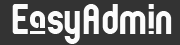
<style>
.page{position:relative;width:180px;height:45px;background:#333333}
.page>*{position:absolute;margin:0}
.t1{font:50.3px "ZillahModernUpper";color:#fbfbfb}
</style>
<div class="page">
<p class="t1" style="left:12px;top:4px;width:160px;height:40px">EasyAdmin</p>
</div>
